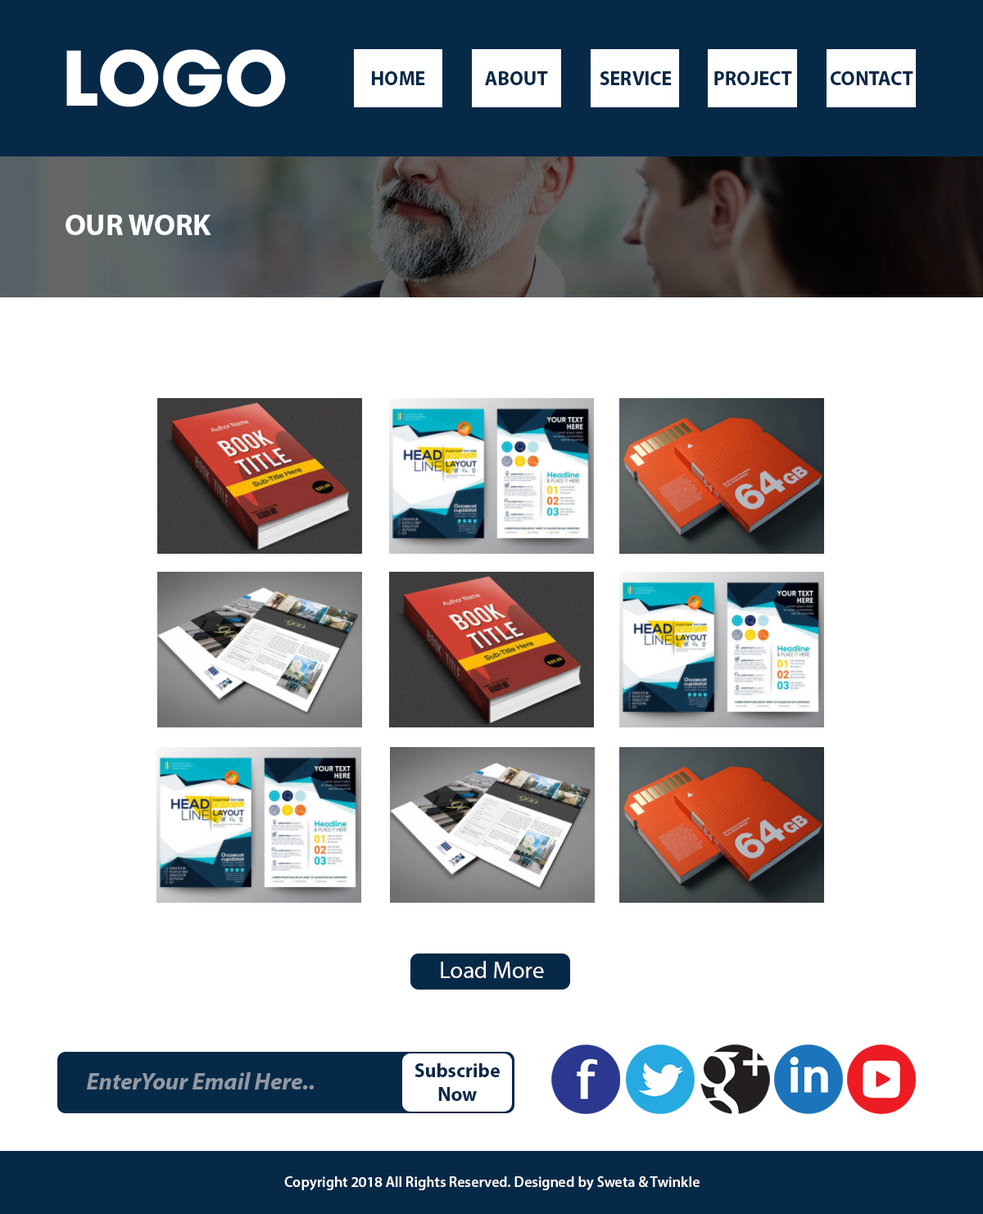
<style>
.page{position:relative;width:983px;height:1214px;background:#ffffff}
.page>*{position:absolute;margin:0}
.t1{font:19.7px "MyriadPro-Bold";color:#072948}
.t2{font:29.5px "MyriadPro-Bold";color:#feffff}
.t3{font:23.4px "MyriadPro-Regular";color:#feffff}
.t4{font:23.7px "MyriadPro-BoldIt";color:#9199a3}
.t5{font:14.7px "MyriadPro-Semibold";color:#ffffff}
</style>
<div class="page">
<p class="t1" style="left:372px;top:71px;width:53px;height:14px">HOME</p>
<p class="t1" style="left:485px;top:71px;width:63px;height:14px">ABOUT</p>
<p class="t1" style="left:599px;top:71px;width:72px;height:14px">SERVICE</p>
<p class="t1" style="left:714px;top:71px;width:78px;height:14px">PROJECT</p>
<p class="t1" style="left:830px;top:71px;width:83px;height:14px">CONTACT</p>
<p class="t2" style="left:66px;top:215px;width:145px;height:20px">OUR WORK</p>
<p class="t3" style="left:441px;top:961px;width:103px;height:17px">Load More</p>
<p class="t4" style="left:87px;top:1072px;width:227px;height:17px">EnterYour Email Here..</p>
<p class="t1" style="left:414px;top:1063px;width:85px;height:38px;text-align:center">Subscribe<br>Now</p>
<p class="t5" style="left:284px;top:1176px;width:415px;height:14px">Copyright 2018 All Rights Reserved. Designed by Sweta &amp; Twinkle</p>
</div>
